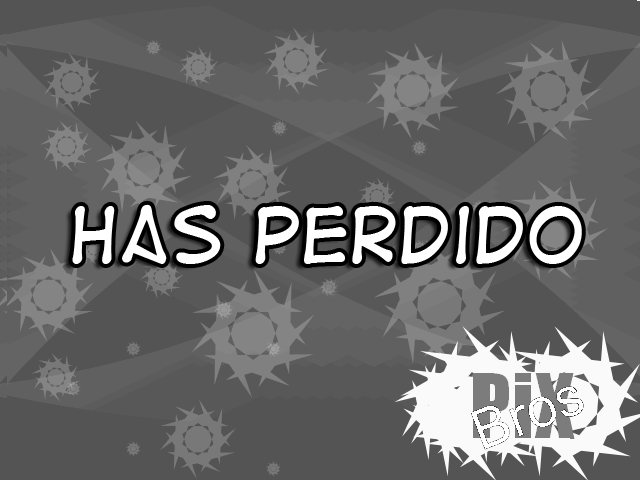
<style>
.page{position:relative;width:640px;height:480px;background:#545454}
.page>*{position:absolute;margin:0}
.t1{font:72px "DigitalStrip2";color:#ffffff}
</style>
<div class="page">
<p class="t1" style="left:72px;top:204px;width:510px;height:61px">has perdido</p>
</div>
